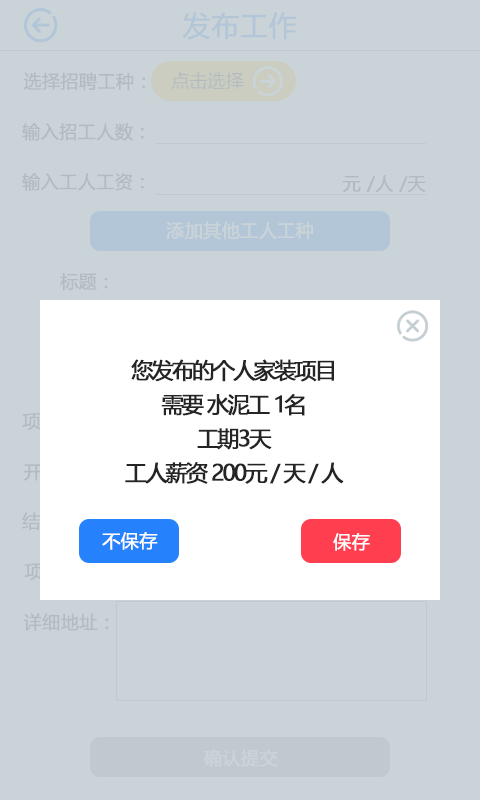
<style>
.page{position:relative;width:480px;height:800px;background:#cad3d8}
.page>*{position:absolute;margin:0}
.t1{font:28px "MicrosoftYaHei";color:#b3c6d8;font-weight:bold}
.t2{font:18px "MicrosoftYaHei";color:#b3bbc0;font-weight:bold}
.t3{font:18px "MicrosoftYaHei";color:#cad3d8;font-weight:bold}
.t4{font:22px/34.1px "MicrosoftYaHei";letter-spacing:-0.1em;color:#252323;font-weight:bold}
.t5{font:18px "MicrosoftYaHei";color:#fefefe;font-weight:bold}
</style>
<div class="page">
<p class="t1" style="left:182px;top:12px;width:115px;height:28px">发布工作</p>
<p class="t2" style="left:23px;top:72px;width:122px;height:19px">选择招聘工种：</p>
<p class="t2" style="left:22px;top:123px;width:122px;height:18px">输入招工人数：</p>
<p class="t2" style="left:22px;top:173px;width:122px;height:18px">输入工人工资：</p>
<p class="t2" style="left:342px;top:175px;width:84px;height:18px">元 /人 /天</p>
<p class="t3" style="left:166px;top:221px;width:147px;height:19px">添加其他工人工种</p>
<p class="t2" style="left:60px;top:273px;width:48px;height:18px">标题：</p>
<p class="t4" style="left:125px;top:359px;width:219px;height:125px;text-align:center">您发布的个人家装项目<br>需要 水泥工 1名<br>工期3天<br>工人薪资 200元 / 天 / 人</p>
<p class="t5" style="left:102px;top:532px;width:56px;height:18px">不保存</p>
<p class="t5" style="left:333px;top:533px;width:37px;height:18px">保存</p>
<p class="t2" style="left:24px;top:613px;width:85px;height:18px">详细地址：</p>
<p class="t3" style="left:203px;top:749px;width:75px;height:18px">确认提交</p>
</div>
